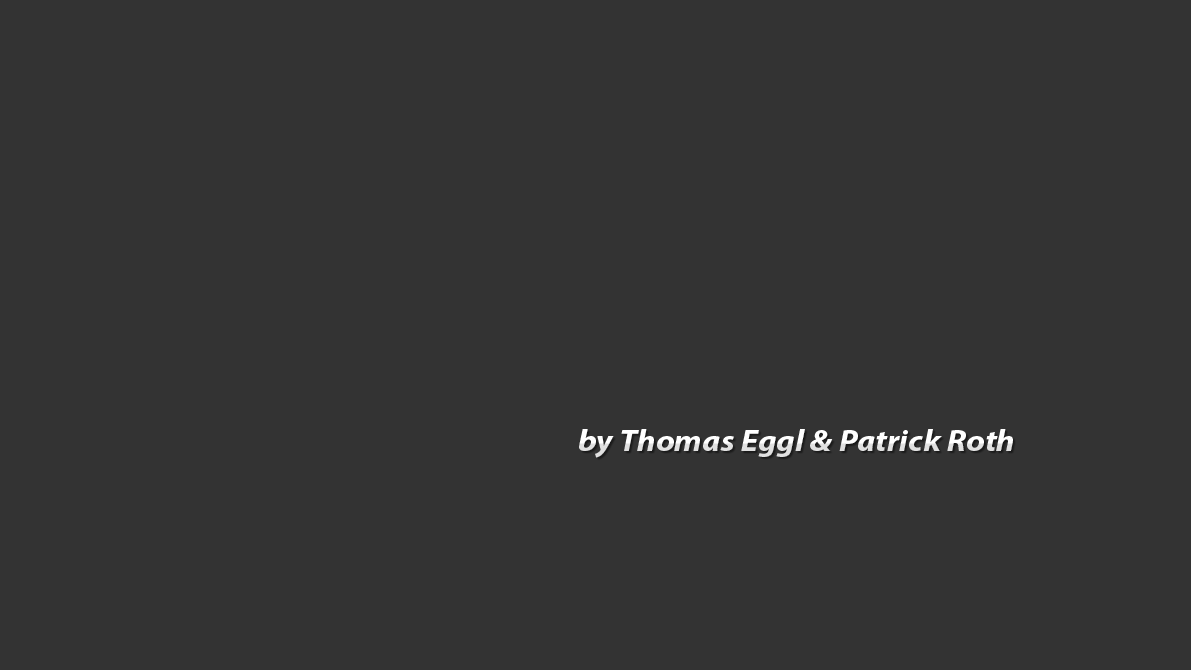
<style>
.page{position:relative;width:1191px;height:670px;background:#333333}
.page>*{position:absolute;margin:0}
.t1{font:30.1px "MyriadPro-BoldIt";scale:1.11 1}
</style>
<div class="page">
<p class="t1" style="left:579px;top:429px;width:434px;height:29px">by Thomas Eggl &amp; Patrick Roth</p>
</div>
